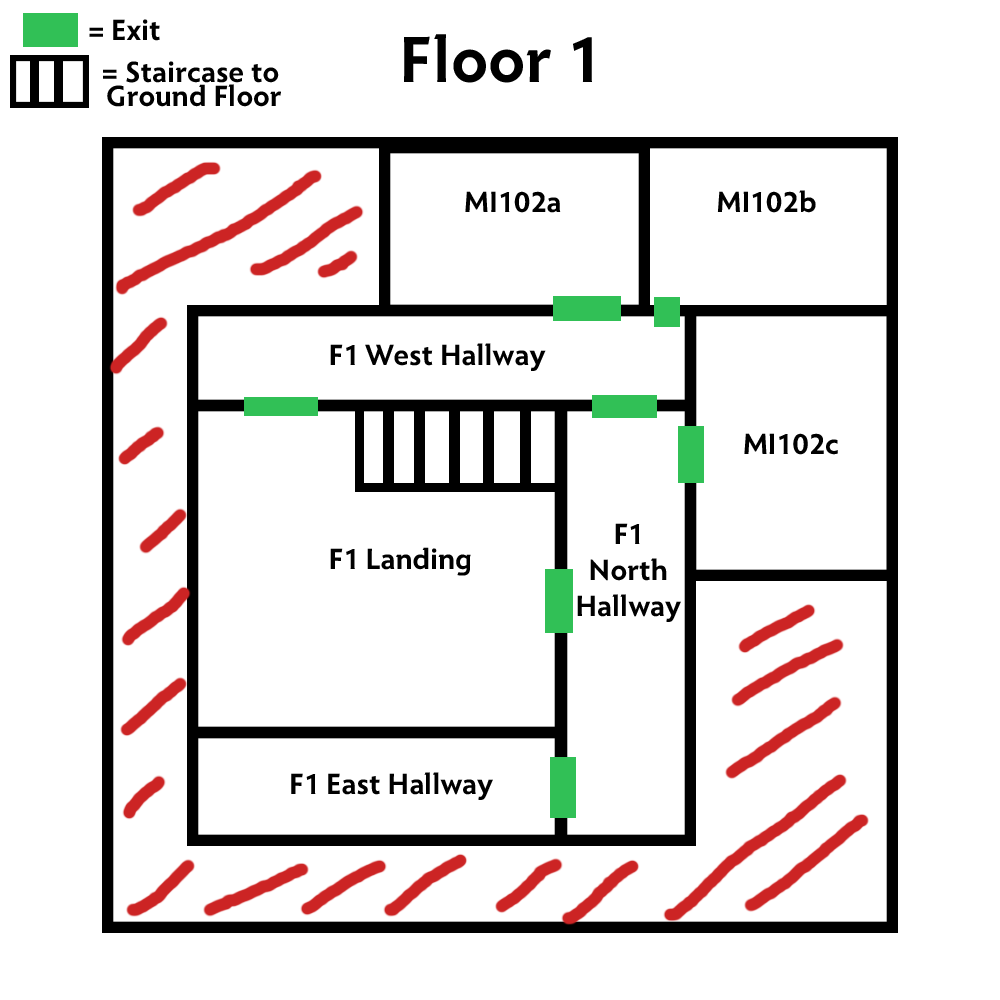
<style>
.page{position:relative;width:1000px;height:1000px;background:#ffffff}
.page>*{position:absolute;margin:0}
.t1{font:30px "Radiance-Bold";color:#000000}
.t2{font:67px "Radiance-Bold";color:#000000}
.t3{font:30px/24px "Radiance-Bold";color:#000000}
</style>
<div class="page">
<p class="t1" style="left:89px;top:19px;width:71px;height:22px">= Exit</p>
<p class="t2" style="left:404px;top:34px;width:188px;height:49px">Floor 1</p>
<p class="t3" style="left:103px;top:61px;width:178px;height:46px;text-align:center">= Staircase to<br> Ground Floor</p>
<p class="t1" style="left:465px;top:191px;width:96px;height:22px">MI102a</p>
<p class="t1" style="left:717px;top:190px;width:99px;height:23px">MI102b</p>
<p class="t1" style="left:330px;top:343px;width:216px;height:28px">F1 West Hallway</p>
<p class="t1" style="left:744px;top:433px;width:94px;height:22px">MI102c</p>
<p class="t1" style="left:577px;top:523px;width:104px;height:99px;text-align:center">F1 <br>North<br>Hallway</p>
<p class="t1" style="left:330px;top:547px;width:141px;height:29px">F1 Landing</p>
<p class="t1" style="left:291px;top:772px;width:202px;height:28px">F1 East Hallway</p>
</div>
